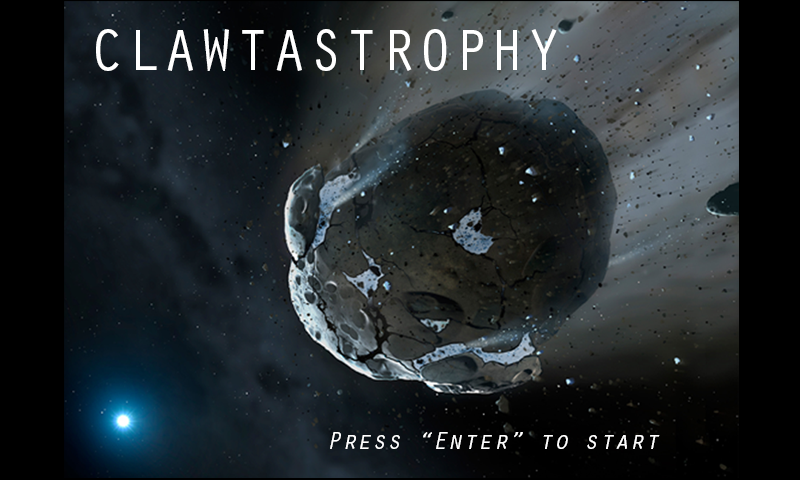
<style>
.page{position:relative;width:800px;height:480px}
.page>*{position:absolute;margin:0}
.t1{font:60.5px "OratorStd";color:#ffffff}
.t2{font:25.2px "OratorStd-Slanted";color:#ffffff}
</style>
<div class="page">
<p class="t1" style="left:96px;top:29px;width:461px;height:42px">CLAWTASTROPHY</p>
<p class="t2" style="left:330px;top:432px;width:330px;height:17px">Press “Enter” to start</p>
</div>
